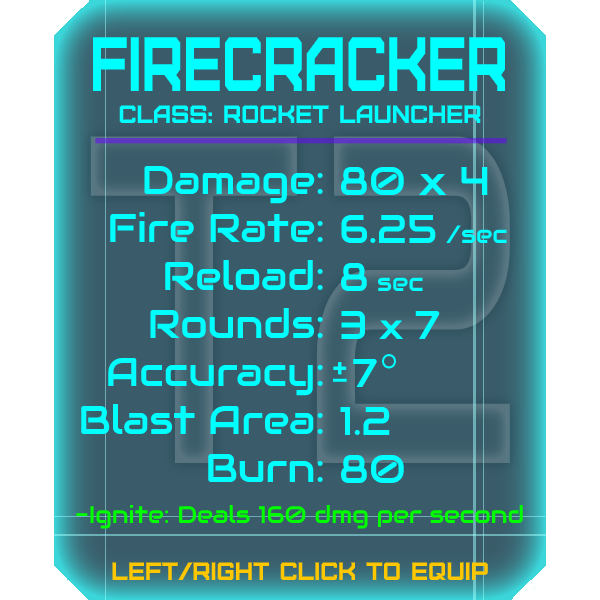
<style>
.page{position:relative;width:600px;height:600px;background:#3a5c6a}
.page>*{position:absolute;margin:0}
.t1{font:76.8px "Furore";color:#00ffff;scale:0.74 1}
.t2{font:25px "Furore";color:#00ffff}
.t3{font:40px "Audiowide-Regular";color:#00ffff}
.t4{font:25px "Audiowide-Regular";color:#00ffff}
.t5{font:35px "Audiowide-Regular";color:#00ffff}
.t6{font:24px "Audiowide-Regular";color:#00ff00}
.t7{font:25px "Furore";color:#ffc700}
</style>
<div class="page">
<p class="t1" style="left:93px;top:37px;width:412px;height:54px">firecracker</p>
<p class="t2" style="left:119px;top:105px;width:362px;height:18px">Class: rocket launcher</p>
<p class="t3" style="left:81px;top:165px;width:242px;height:317px;text-align:right">Damage:<br>Fire Rate:<br>Reload:<br>Rounds:<br>Accuracy:<br>Blast Area:<br>Burn:</p>
<p class="t3" style="left:340px;top:166px;width:167px;height:317px">80 x 4<br>6.25<span class="t4"> /sec<br></span>8<span class="t4"> sec<br></span>3 <span class="t5">x </span>7<br> 7<br>1.2<br>80</p>
<p class="t6" style="left:76px;top:504px;width:447px;height:25px">-Ignite: Deals 160 dmg per second</p>
<p class="t7" style="left:112px;top:562px;width:376px;height:18px">left/right click to equip</p>
</div>
